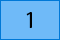
<style>
.page{position:relative;width:60px;height:40px;background:#6fbaf8}
.page>*{position:absolute;margin:0}
.t1{font:24px "MyriadPro-Regular";color:#000000}
</style>
<div class="page">
<p class="t1" style="left:26px;top:12px;width:6px;height:16px">1</p>
</div>
